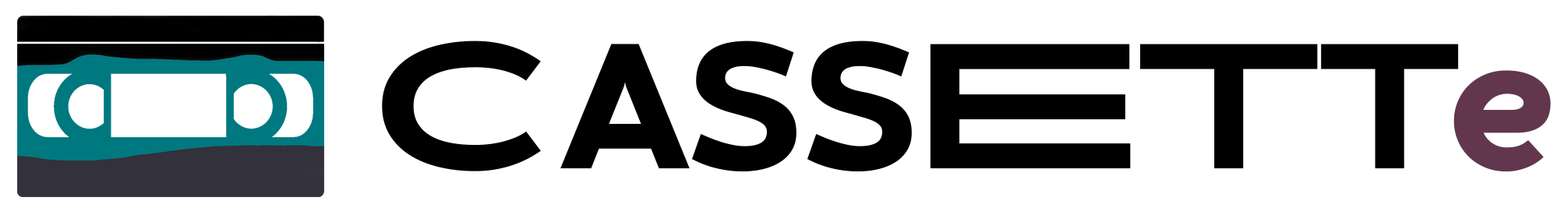
<style>
.page{position:relative;width:1568px;height:215px;background:#ffffff}
.page>*{position:absolute;margin:0}
.t1{font:187px "CodecWarmLogo-Regular";color:#000000}
.t2{font:187px "CodecWarmLogo-Regular";color:#62374e}
</style>
<div class="page">
<p class="t1" style="left:382px;top:41px;width:1169px;height:131px">CASSETT<span class="t2">e</span></p>
</div>
